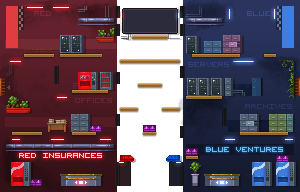
<style>
.page{position:relative;width:300px;height:192px}
.page>*{position:absolute;margin:0}
.t1{font:12px "VisitorTT2BRK";color:#802a39}
.t2{font:12px "VisitorTT2BRK";color:#3b4984}
.t3{font:12px "VisitorTT2BRK";color:#344073}
.t4{font:12px "VisitorTT2BRK";color:#6a2330}
.t5{font:12px "VisitorTT2BRK";color:#2a355f}
.t6{font:10px "VisitorTT1BRK";color:#72bbe5;text-transform:uppercase}
.t7{font:10px "VisitorTT1BRK";color:#ffd2c8;text-transform:uppercase}
</style>
<div class="page">
<p class="t1" style="left:34px;top:11px;width:17px;height:5px">Red</p>
<p class="t2" style="left:247px;top:11px;width:23px;height:5px">blue</p>
<p class="t3" style="left:188px;top:62px;width:41px;height:5px">SERVERS</p>
<p class="t4" style="left:75px;top:98px;width:37px;height:5px">offices</p>
<p class="t5" style="left:245px;top:104px;width:47px;height:5px">ARCHIVES</p>
<p class="t6" style="left:206px;top:147px;width:77px;height:5px">BLUE VENTURES</p>
<p class="t7" style="left:19px;top:153px;width:83px;height:5px">red insurances</p>
</div>
